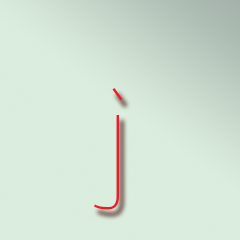
<style>
.page{position:relative;width:240px;height:240px}
.page>*{position:absolute;margin:0}
.t1{font:128px "FZLTCXHJW--GB1-0";color:#e81d2b}
</style>
<div class="page">
<p class="t1" style="left:94px;top:88px;width:29px;height:122px">j</p>
</div>
